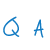
<style>
.page{position:relative;width:50px;height:50px;background:#ffffff}
.page>*{position:absolute;margin:0}
.t1{font:33.9px "Fh_Script";color:#147cc3}
</style>
<div class="page">
<p class="t1" style="left:3px;top:16px;width:41px;height:22px">Q A</p>
</div>
